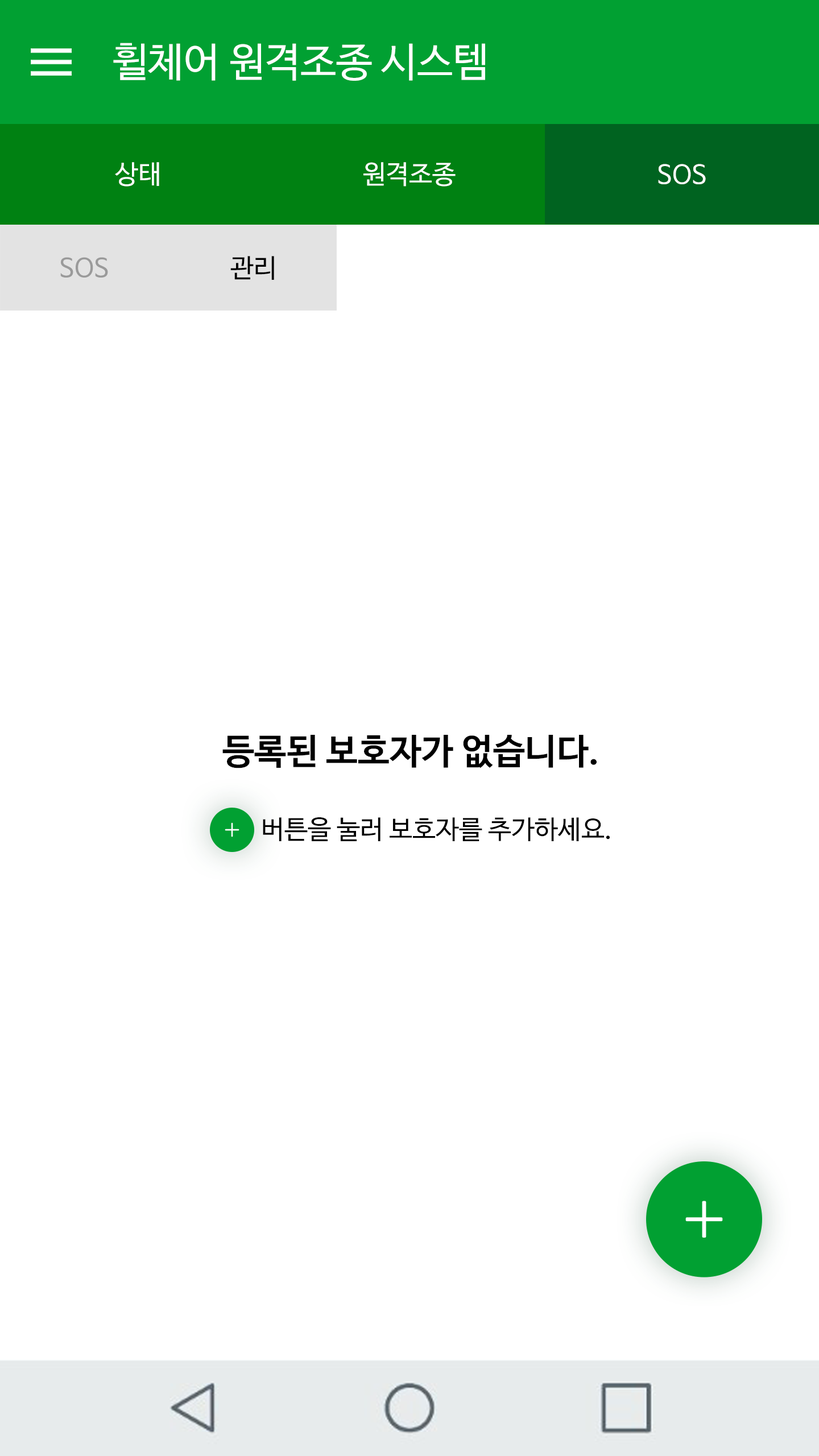
<style>
.page{position:relative;width:819px;height:1456px;background:#ffffff}
.page>*{position:absolute;margin:0}
.t1{font:40.3px "NanumBarunGothicOTF";color:#ffffff}
.t2{font:26.1px "NanumBarunGothicOTF";color:#ffffff}
.t3{font:26.1px "NanumBarunGothicOTF";color:#9a9a9a}
.t4{font:26.1px "NanumBarunGothicOTF";color:#000000}
.t5{font:35.5px "NanumBarunGothicOTFBold";color:#000000}
</style>
<div class="page">
<p class="t1" style="left:113px;top:43px;width:372px;height:38px">휠체어 원격조종 시스템</p>
<p class="t2" style="left:115px;top:162px;width:44px;height:25px">상태</p>
<p class="t2" style="left:363px;top:162px;width:93px;height:25px">원격조종</p>
<p class="t2" style="left:658px;top:164px;width:48px;height:20px">SOS</p>
<p class="t3" style="left:60px;top:257px;width:48px;height:21px">SOS</p>
<p class="t4" style="left:230px;top:256px;width:44px;height:24px">관리</p>
<p class="t5" style="left:222px;top:735px;width:375px;height:33px">등록된 보호자가 없습니다.</p>
<p class="t4" style="left:263px;top:817px;width:347px;height:24px">버튼을 눌러 보호자를 추가하세요.</p>
</div>
